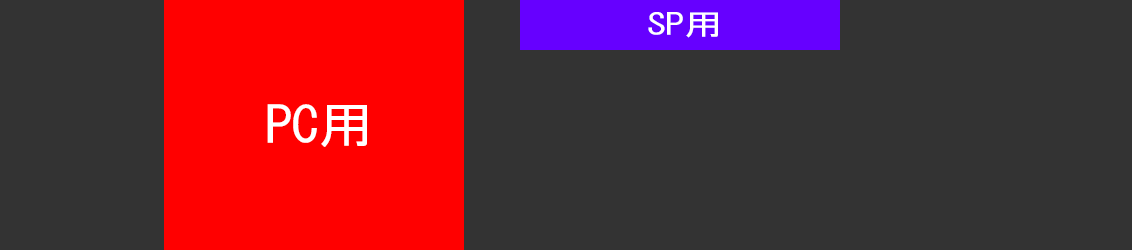
<style>
.page{position:relative;width:1132px;height:250px;background:#333333}
.page>*{position:absolute;margin:0}
.t1{font:30px "MS-Gothic";letter-spacing:-0.02em;color:#ffffff;scale:1.28 1}
.t2{font:50.1px "MS-Gothic";letter-spacing:-0.02em;color:#ffffff;scale:1.1 1}
</style>
<div class="page">
<p class="t1" style="left:648px;top:12px;width:70px;height:26px">SP用</p>
<p class="t2" style="left:267px;top:104px;width:100px;height:43px">PC用</p>
</div>
